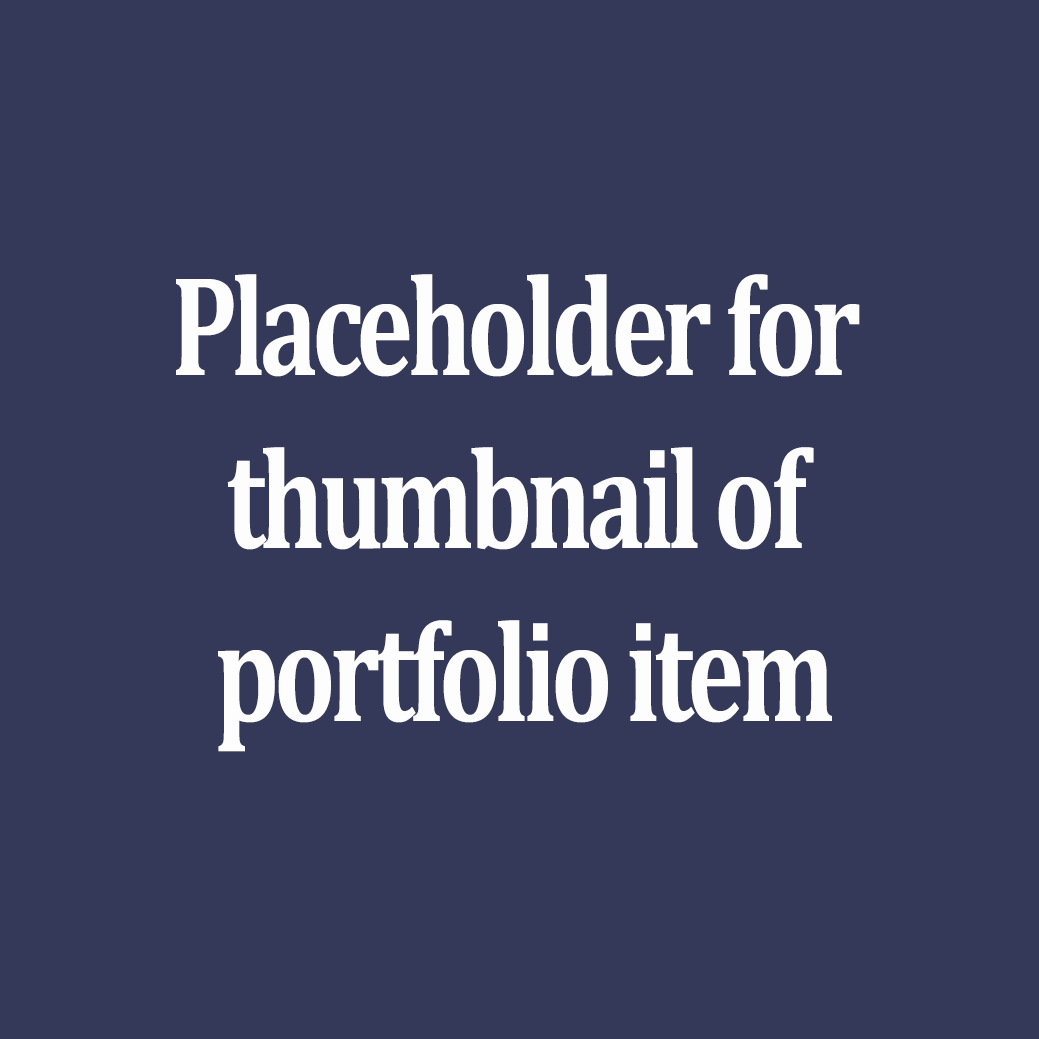
<style>
.page{position:relative;width:1039px;height:1039px;background:#353959}
.page>*{position:absolute;margin:0}
.t1{font:144px "Cambria-Bold";letter-spacing:-0.05em;color:#fdfdfe;scale:0.75 1}
</style>
<div class="page">
<p class="t1" style="left:176px;top:274px;width:684px;height:478px;text-align:center">Placeholder for <br>thumbnail of <br>portfolio item</p>
</div>
